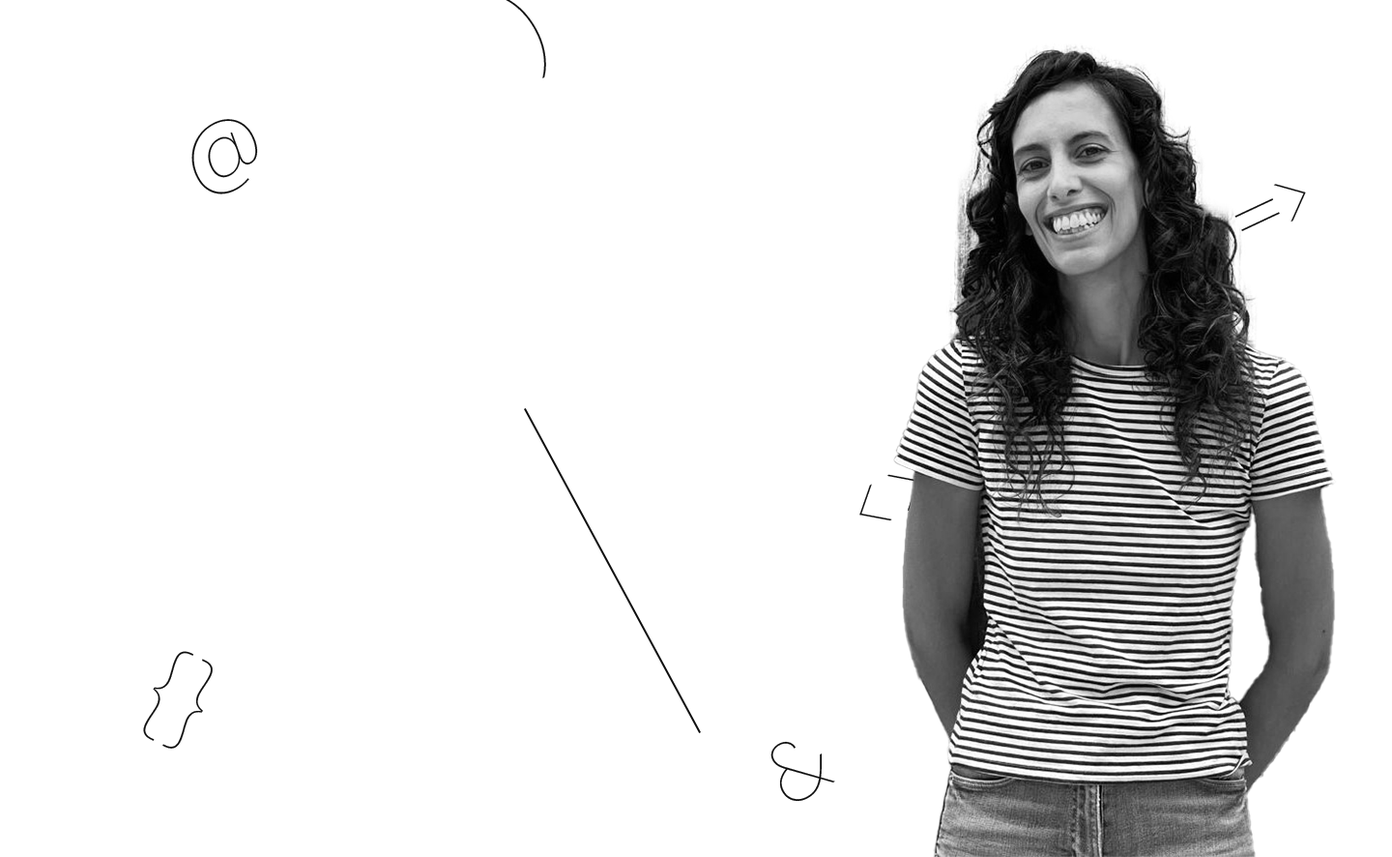
<style>
.page{position:relative;width:1392px;height:857px;background:#ffffff}
.page>*{position:absolute;margin:0}
.t1{font:85.5px "Poppins-Thin";letter-spacing:0.12em;color:#0f0f0f}
.t2{font:85.5px "Poppins-Thin";color:#0f0f0f}
</style>
<div class="page">
<p class="t1" style="left:191px;top:119px;width:67px;height:75px;rotate:-30deg">@</p>
<p class="t2" style="left:1235px;top:184px;width:71px;height:47px;rotate:155deg">&lt;=</p>
<p class="t1" style="left:859px;top:474px;width:61px;height:47px;rotate:-30deg">&lt;&gt;</p>
<p class="t1" style="left:143px;top:651px;width:70px;height:97px;rotate:25deg">{}</p>
<p class="t1" style="left:771px;top:741px;width:64px;height:60px;rotate:-30deg">&amp;</p>
</div>
